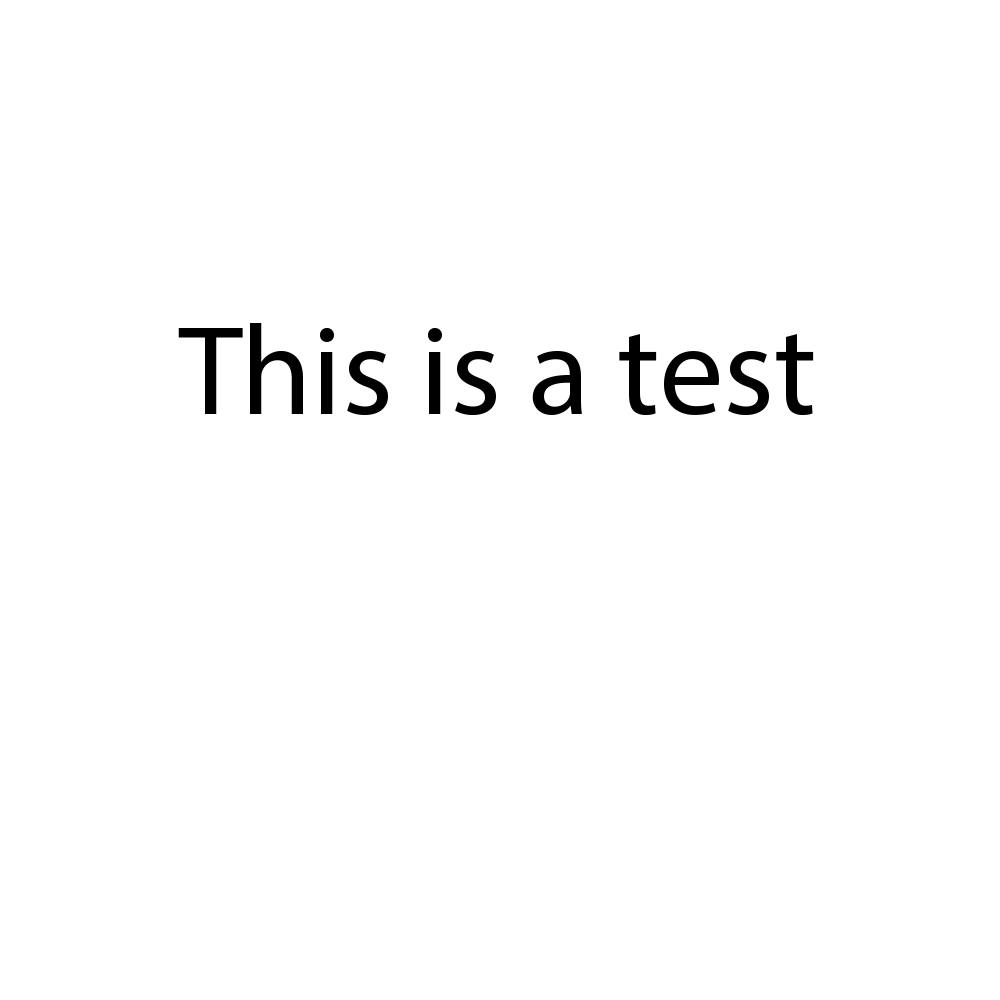
<style>
.page{position:relative;width:1000px;height:1000px;background:#ffffff}
.page>*{position:absolute;margin:0}
.t1{font:128px "MyriadHebrew-Regular";color:#000000}
</style>
<div class="page">
<p class="t1" style="left:178px;top:323px;width:636px;height:92px">This is a test</p>
</div>
